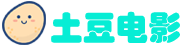
<style>
.page{position:relative;width:195px;height:45px;background:#ffffff}
.page>*{position:absolute;margin:0}
.t1{font:32.9px "STHupo";color:#07edd5}
</style>
<div class="page">
<p class="t1" style="left:51px;top:11px;width:129px;height:32px">土豆电影</p>
</div>
